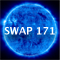
<style>
.page{position:relative;width:60px;height:60px}
.page>*{position:absolute;margin:0}
.t1{font:10px "LucidaGrande-Bold";color:#ffffff}
</style>
<div class="page">
<p class="t1" style="left:4px;top:27px;width:51px;height:8px">SWAP 171</p>
</div>
